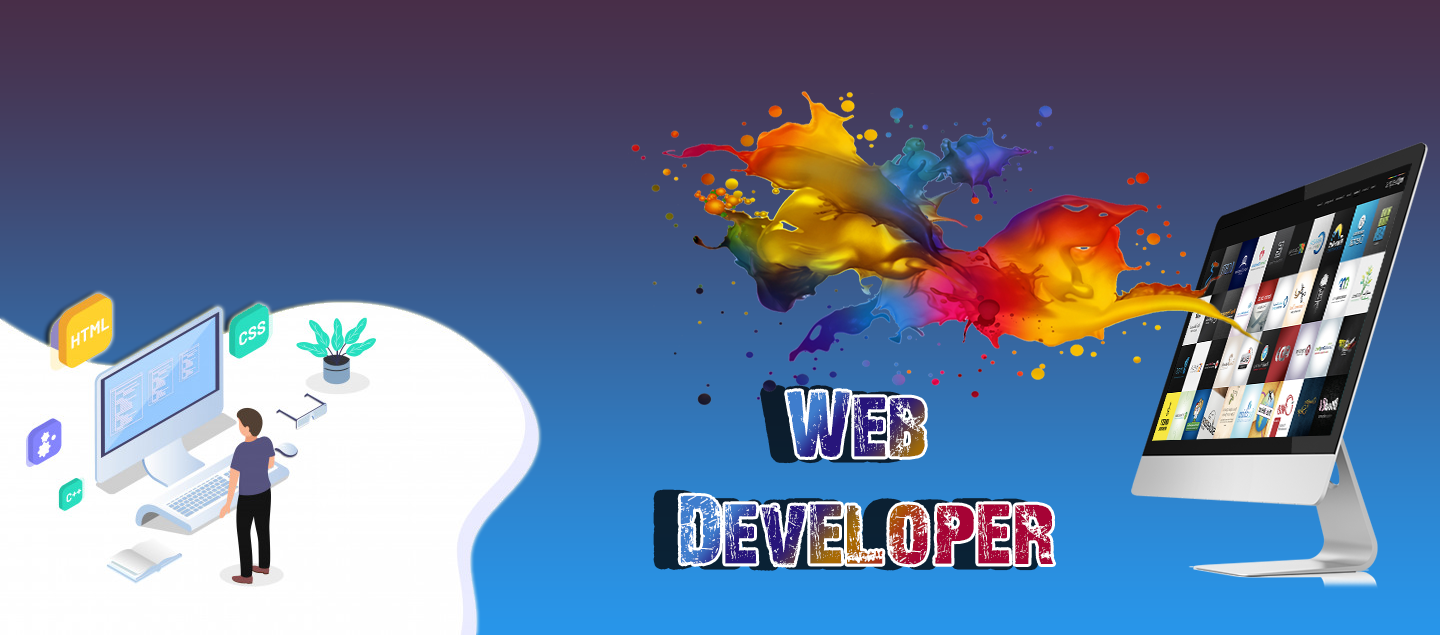
<style>
.page{position:relative;width:1440px;height:635px}
.page>*{position:absolute;margin:0}
.t1{font:88.9px "28-Days-Later-Regular"}
</style>
<div class="page">
<p class="t1" style="left:680px;top:391px;width:374px;height:174px;text-align:center">Web <br>Developer</p>
</div>
